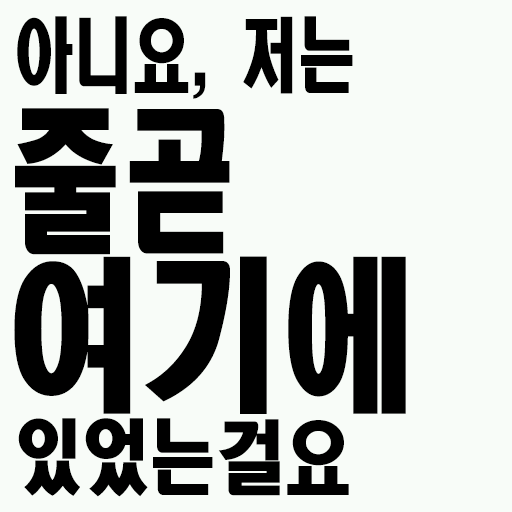
<style>
.page{position:relative;width:512px;height:512px;background:#f8fcf8}
.page>*{position:absolute;margin:0}
.t1{font:81px "HeadlineR-HM";color:#000000;scale:0.72 1}
.t2{font:156.6px "HeadlineR-HM";color:#000000;scale:0.72 1}
.t3{font:163.8px "HeadlineR-HM";color:#000000;scale:0.83 1}
.t4{font:81px "HeadlineR-HM";color:#000000;scale:0.83 1}
</style>
<div class="page">
<p class="t1" style="left:17px;top:16px;width:336px;height:83px">아니요, 저는</p>
<p class="t2" style="left:15px;top:108px;width:215px;height:147px">줄곧</p>
<p class="t3" style="left:14px;top:256px;width:392px;height:158px">여기에</p>
<p class="t4" style="left:18px;top:418px;width:331px;height:79px">있었는걸요</p>
</div>
